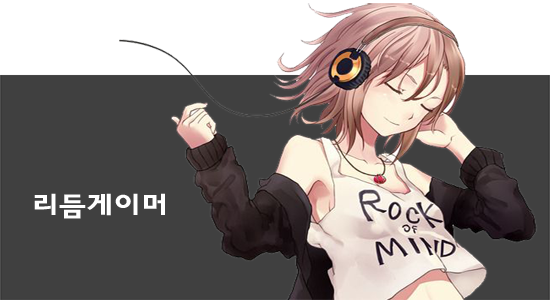
<style>
.page{position:relative;width:550px;height:300px;background:#404040}
.page>*{position:absolute;margin:0}
.t1{font:27px "HaanYGodic25";color:#ffffff;scale:1.13 1}
</style>
<div class="page">
<p class="t1" style="left:34px;top:193px;width:131px;height:26px">리듬게이머</p>
</div>
